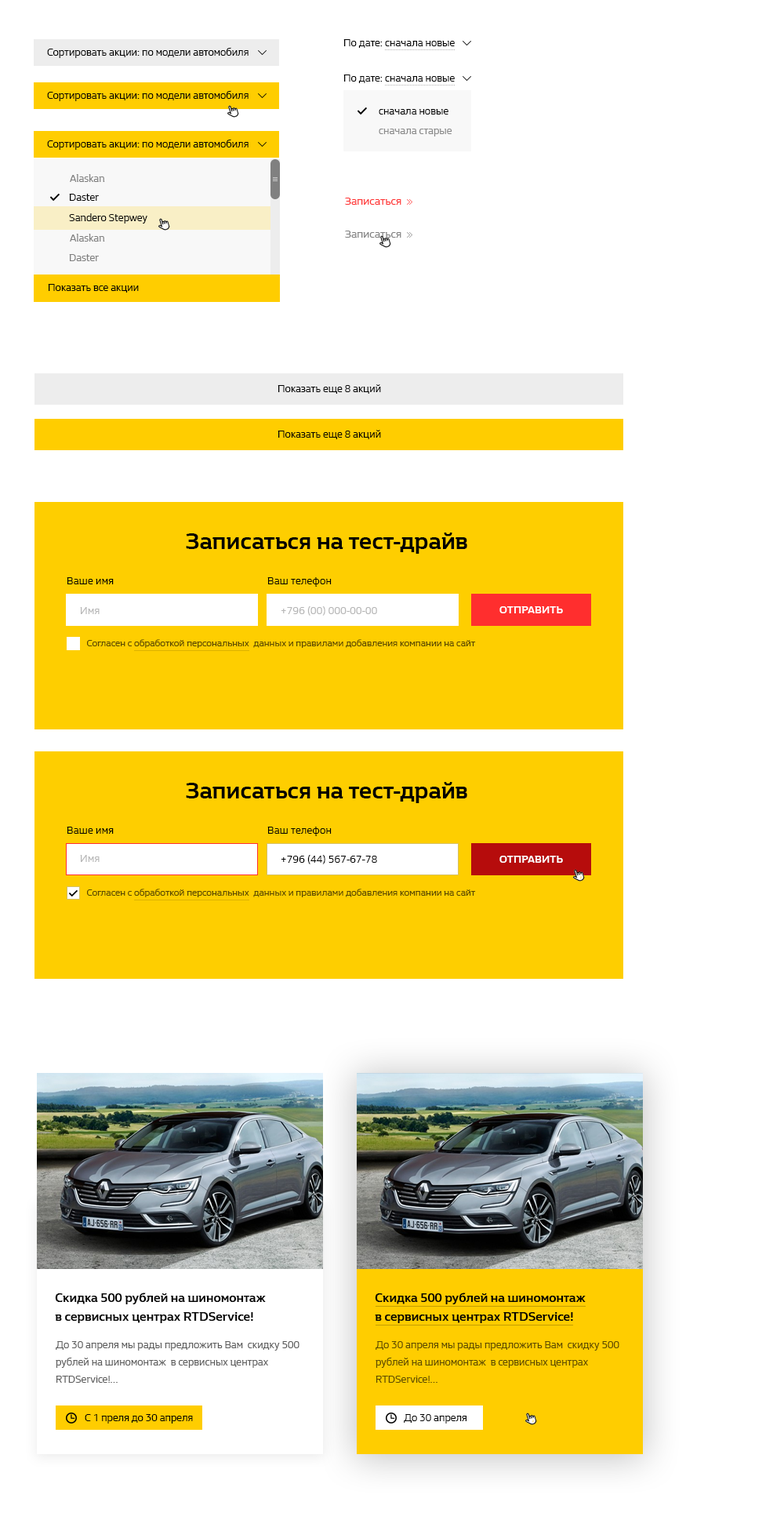
<style>
.page{position:relative;width:784px;height:1520px;background:#ffffff}
.page>*{position:absolute;margin:0}
.t1{font:10.2px "RenaultLife";color:#000000}
.t2{font:10.2px "RenaultLife";color:#8a8a8a}
.t3{font:10.2px "RenaultLife";color:#808080}
.t4{font:11px "RenaultLife";color:#ff2e2e}
.t5{font:11px "RenaultLife";color:#808080}
.t6{font:23.5px "RenaultLife-Bold";color:#000000}
.t7{font:10.4px "RenaultLife";color:#000000}
.t8{font:10.4px "RenaultLife";color:#b6b6b6}
.t9{font:10.5px "RenaultLife-Bold";color:#ffffff;text-transform:uppercase}
.t10{font:9.4px "RenaultLife";color:#584700}
.t11{font:12.6px/18.8px "RenaultLife-Bold";color:#000000}
.t12{font:10.2px/17.3px "RenaultLife";color:#5c5c5c}
.t13{font:10.2px/17.3px "RenaultLife";color:#5c4a00}
</style>
<div class="page">
<p class="t1" style="left:344px;top:39px;width:111px;height:9px">По дате: сначала новые</p>
<p class="t1" style="left:47px;top:47px;width:202px;height:11px">Сортировать акции: по модели автомобиля</p>
<p class="t1" style="left:344px;top:75px;width:111px;height:8px">По дате: сначала новые</p>
<p class="t1" style="left:47px;top:90px;width:202px;height:11px">Сортировать акции: по модели автомобиля</p>
<p class="t1" style="left:379px;top:109px;width:70px;height:6px">сначала новые</p>
<p class="t2" style="left:379px;top:129px;width:74px;height:7px">сначала старые</p>
<p class="t1" style="left:47px;top:139px;width:202px;height:11px">Сортировать акции: по модели автомобиля</p>
<p class="t3" style="left:70px;top:174px;width:35px;height:8px">Alaskan</p>
<p class="t1" style="left:69px;top:194px;width:30px;height:7px">Daster</p>
<p class="t4" style="left:345px;top:198px;width:57px;height:7px">Записаться</p>
<p class="t1" style="left:69px;top:213px;width:78px;height:11px">Sandero Stepwey</p>
<p class="t3" style="left:70px;top:234px;width:35px;height:8px">Alaskan</p>
<p class="t5" style="left:345px;top:231px;width:57px;height:7px">Записаться</p>
<p class="t3" style="left:69px;top:254px;width:30px;height:7px">Daster</p>
<p class="t1" style="left:48px;top:284px;width:91px;height:9px">Показать все акции</p>
<p class="t1" style="left:278px;top:384px;width:103px;height:10px">Показать еще 8 акций</p>
<p class="t1" style="left:278px;top:430px;width:103px;height:9px">Показать еще 8 акций</p>
<p class="t6" style="left:186px;top:533px;width:282px;height:21px">Записаться на тест-драйв</p>
<p class="t7" style="left:67px;top:577px;width:47px;height:7px">Ваше имя</p>
<p class="t7" style="left:267px;top:577px;width:65px;height:10px">Ваш телефон</p>
<p class="t8" style="left:80px;top:607px;width:20px;height:7px">Имя</p>
<p class="t8" style="left:281px;top:606px;width:96px;height:10px">+796 (00) 000-00-00</p>
<p class="t9" style="left:500px;top:606px;width:63px;height:7px">Отправить</p>
<p class="t10" style="left:87px;top:639px;width:389px;height:9px">Согласен с обработкой персональных  данных и правилами добавления компании на сайт</p>
<p class="t6" style="left:186px;top:782px;width:282px;height:21px">Записаться на тест-драйв</p>
<p class="t7" style="left:67px;top:827px;width:47px;height:7px">Ваше имя</p>
<p class="t7" style="left:267px;top:827px;width:65px;height:9px">Ваш телефон</p>
<p class="t8" style="left:80px;top:855px;width:20px;height:7px">Имя</p>
<p class="t7" style="left:281px;top:855px;width:96px;height:9px">+796 (44) 567-67-78</p>
<p class="t9" style="left:500px;top:856px;width:63px;height:7px">Отправить</p>
<p class="t10" style="left:87px;top:889px;width:389px;height:8px">Согласен с обработкой персональных  данных и правилами добавления компании на сайт</p>
<p class="t11" style="left:55px;top:1293px;width:211px;height:30px">Скидка 500 рублей на шиномонтаж  <br>в сервисных центрах RTDService!</p>
<p class="t11" style="left:375px;top:1293px;width:211px;height:30px">Скидка 500 рублей на шиномонтаж  <br>в сервисных центрах RTDService!</p>
<p class="t12" style="left:56px;top:1341px;width:244px;height:42px">До 30 апреля мы рады предложить Вам  скидку 500 рублей на шиномонтаж  в сервисных центрах RTDService!...</p>
<p class="t13" style="left:376px;top:1341px;width:244px;height:42px">До 30 апреля мы рады предложить Вам  скидку 500 рублей на шиномонтаж  в сервисных центрах RTDService!...</p>
<p class="t1" style="left:85px;top:1414px;width:108px;height:10px">С 1 преля до 30 апреля</p>
<p class="t1" style="left:404px;top:1414px;width:63px;height:10px">До 30 апреля</p>
</div>
